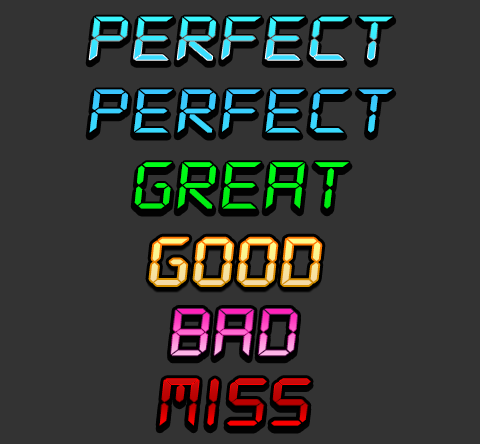
<style>
.page{position:relative;width:480px;height:444px;background:#333333}
.page>*{position:absolute;margin:0}
.t1{font:67.8px "DS-Digital-Italic";color:#39ebfd;scale:1.32 1}
.t2{font:67.8px "DS-Digital-Italic";color:#39cefd;scale:1.32 1}
.t3{font:72.7px "DS-Digital-Italic";color:#00f615;scale:1.23 1}
.t4{font:72.7px "DS-Digital-Italic";color:#f8e99a;scale:1.23 1}
.t5{font:72.7px "DS-Digital-Italic";scale:1.23 1}
.t6{font:72.7px "DS-Digital-Italic";color:#c70101;scale:1.23 1}
</style>
<div class="page">
<p class="t1" style="left:89px;top:16px;width:304px;height:44px">PERFECT</p>
<p class="t2" style="left:89px;top:89px;width:304px;height:44px">PERFECT</p>
<p class="t3" style="left:134px;top:162px;width:215px;height:47px">GREAT</p>
<p class="t4" style="left:150px;top:238px;width:171px;height:47px">GOOD</p>
<p class="t5" style="left:171px;top:309px;width:126px;height:47px">BAD</p>
<p class="t6" style="left:159px;top:379px;width:151px;height:47px">MISS</p>
</div>
